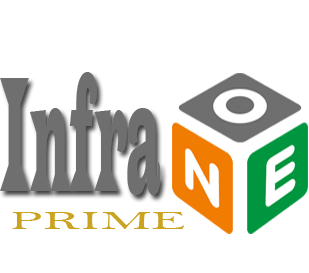
<style>
.page{position:relative;width:309px;height:273px;background:#ffffff}
.page>*{position:absolute;margin:0}
.t1{font:170px "LatinWide";color:#6f6f6f;scale:0.2 1}
.t2{font:27.3px "BellMT";color:#caa420;scale:1.99 1}
</style>
<div class="page">
<p class="t1" style="left:0px;top:72px;width:161px;height:123px">Infra</p>
<p class="t2" style="left:12px;top:212px;width:173px;height:17px">PRIME</p>
</div>
